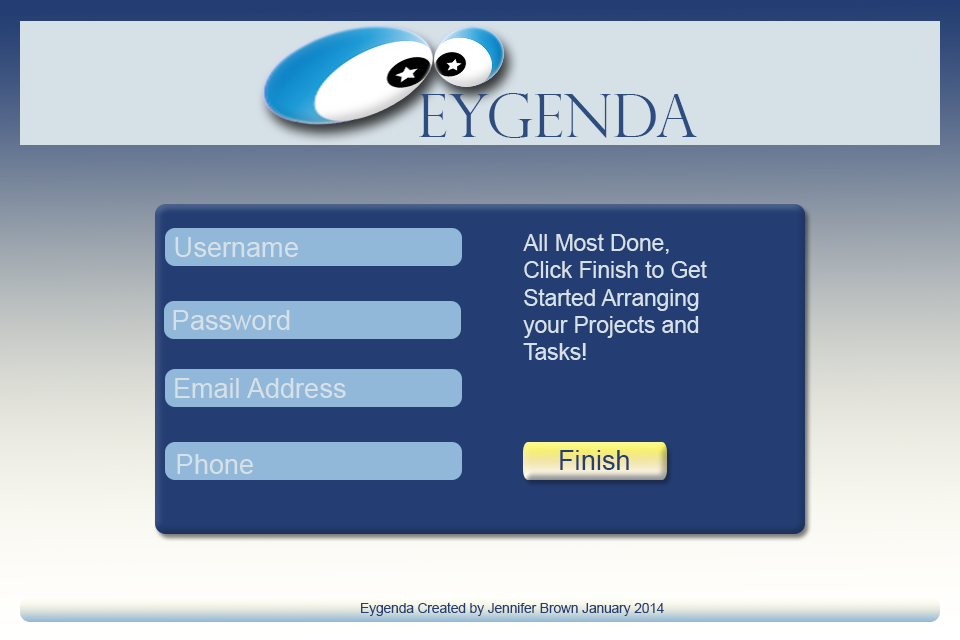
<style>
.page{position:relative;width:960px;height:640px;background:#243e73}
.page>*{position:absolute;margin:0}
.t1{font:60px "PerpetuaTitlingMT-Light";color:#2d4d80}
.t2{font:27.2px "ArialMT";color:#d6e1e7}
.t3{font:22.6px "ArialMT";color:#d6e1e7}
.t4{font:27.2px "ArialMT";color:#243e73}
.t5{font:13.6px "ArialMT";color:#243e73}
</style>
<div class="page">
<p class="t1" style="left:419px;top:93px;width:278px;height:45px">EYGENDA</p>
<p class="t2" style="left:175px;top:237px;width:123px;height:20px">Username</p>
<p class="t3" style="left:523px;top:234px;width:184px;height:126px">All Most Done, <br>Click Finish to Get <br>Started Arranging <br>your Projects and <br>Tasks!</p>
<p class="t2" style="left:173px;top:310px;width:117px;height:20px">Password</p>
<p class="t2" style="left:175px;top:378px;width:171px;height:20px">Email Address</p>
<p class="t2" style="left:177px;top:454px;width:76px;height:20px">Phone</p>
<p class="t4" style="left:560px;top:450px;width:69px;height:20px">Finish</p>
<p class="t5" style="left:361px;top:602px;width:303px;height:14px">Eygenda Created by Jennifer Brown January 2014</p>
</div>
